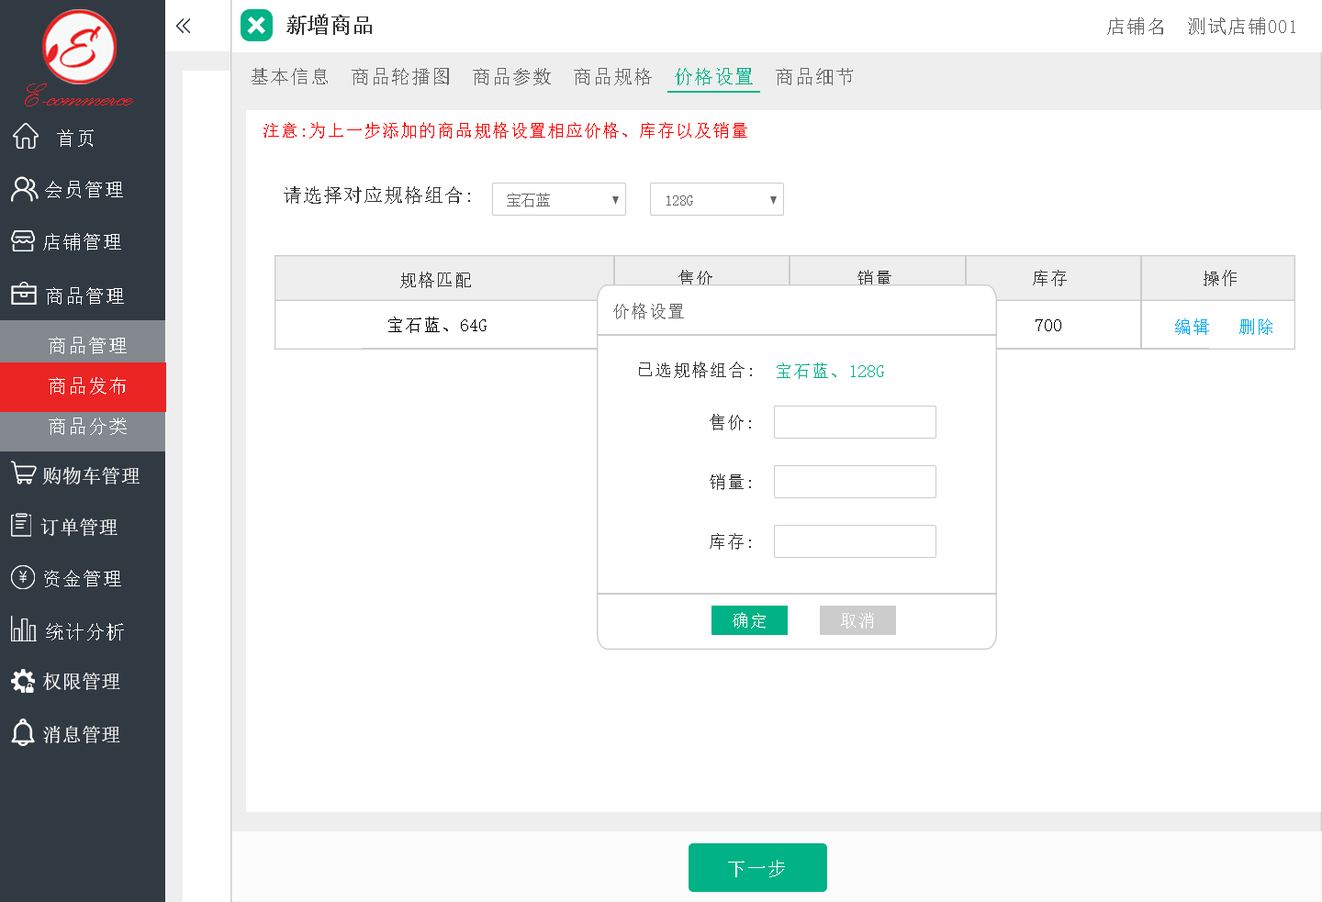
<style>
.page{position:relative;width:1322px;height:902px;background:#ffffff}
.page>*{position:absolute;margin:0}
.t1{font:22px "AdobeHeitiStd-Regular";color:#333333}
.t2{font:19.6px "NSimSun";color:#666666}
.t3{font:19.6px "NSimSun";color:#00b286}
.t4{font:41.1px "PalaceScriptMT";color:#eb2424}
.t5{font:17.1px "NSimSun";color:#ff0000}
.t6{font:19.6px "NSimSun";color:#feffff}
.t7{font:19.6px "NSimSun";color:#333333}
.t8{font:14.7px "NSimSun";color:#666666}
.t9{font:17.1px "NSimSun";color:#333333}
.t10{font:17.1px "NSimSun";color:#666666}
.t11{font:17.1px "NSimSun";color:#000000}
.t12{font:17.1px "NSimSun";color:#03a9f3}
.t13{font:19.6px "NSimSun";color:#ffffff}
.t14{font:17.1px "NSimSun";color:#00b286}
.t15{font:19.6px "SimSun";color:#ffffff}
</style>
<div class="page">
<p class="t1" style="left:286px;top:14px;width:86px;height:21px">新增商品</p>
<p class="t2" style="left:1107px;top:17px;width:188px;height:18px">店铺名  测试店铺001</p>
<p class="t2" style="left:251px;top:68px;width:602px;height:17px">基本信息  商品轮播图  商品参数  商品规格  <span class="t3">价格设置</span>  商品细节</p>
<p class="t4" style="left:25px;top:84px;width:109px;height:22px">E-commerce</p>
<p class="t5" style="left:263px;top:122px;width:484px;height:17px">注意:为上一步添加的商品规格设置相应价格、库存以及销量</p>
<p class="t6" style="left:57px;top:129px;width:37px;height:18px">首页</p>
<p class="t6" style="left:45px;top:181px;width:78px;height:17px">会员管理</p>
<p class="t7" style="left:284px;top:186px;width:186px;height:18px">请选择对应规格组合:</p>
<p class="t8" style="left:507px;top:193px;width:43px;height:14px">宝石蓝</p>
<p class="t8" style="left:666px;top:195px;width:27px;height:11px">128G</p>
<p class="t6" style="left:43px;top:233px;width:78px;height:18px">店铺管理</p>
<p class="t9" style="left:678px;top:270px;width:34px;height:16px">售价</p>
<p class="t9" style="left:857px;top:270px;width:34px;height:16px">销量</p>
<p class="t9" style="left:1033px;top:270px;width:34px;height:16px">库存</p>
<p class="t9" style="left:1203px;top:270px;width:33px;height:16px">操作</p>
<p class="t9" style="left:400px;top:272px;width:71px;height:16px">规格匹配</p>
<p class="t6" style="left:46px;top:287px;width:78px;height:18px">商品管理</p>
<p class="t10" style="left:613px;top:303px;width:71px;height:16px">价格设置</p>
<p class="t11" style="left:388px;top:317px;width:98px;height:16px">宝石蓝、64G</p>
<p class="t11" style="left:1035px;top:319px;width:26px;height:12px">700</p>
<p class="t12" style="left:1175px;top:318px;width:97px;height:17px">编辑   删除</p>
<p class="t13" style="left:49px;top:337px;width:78px;height:17px">商品管理</p>
<p class="t9" style="left:639px;top:362px;width:113px;height:16px">已选规格组合:</p>
<p class="t14" style="left:776px;top:363px;width:108px;height:16px">宝石蓝、128G</p>
<p class="t13" style="left:49px;top:377px;width:77px;height:18px">商品发布</p>
<p class="t9" style="left:709px;top:414px;width:42px;height:16px">售价:</p>
<p class="t13" style="left:49px;top:418px;width:78px;height:17px">商品分类</p>
<p class="t15" style="left:42px;top:467px;width:98px;height:18px">购物车管理</p>
<p class="t9" style="left:709px;top:474px;width:42px;height:16px">销量:</p>
<p class="t15" style="left:40px;top:519px;width:77px;height:17px">订单管理</p>
<p class="t9" style="left:709px;top:533px;width:42px;height:17px">库存:</p>
<p class="t6" style="left:44px;top:570px;width:77px;height:17px">资金管理</p>
<p class="t6" style="left:46px;top:623px;width:78px;height:18px">统计分析</p>
<p class="t15" style="left:43px;top:673px;width:77px;height:17px">权限管理</p>
<p class="t15" style="left:43px;top:726px;width:77px;height:17px">消息管理</p>
<p class="t13" style="left:728px;top:860px;width:57px;height:17px">下一步</p>
</div>
